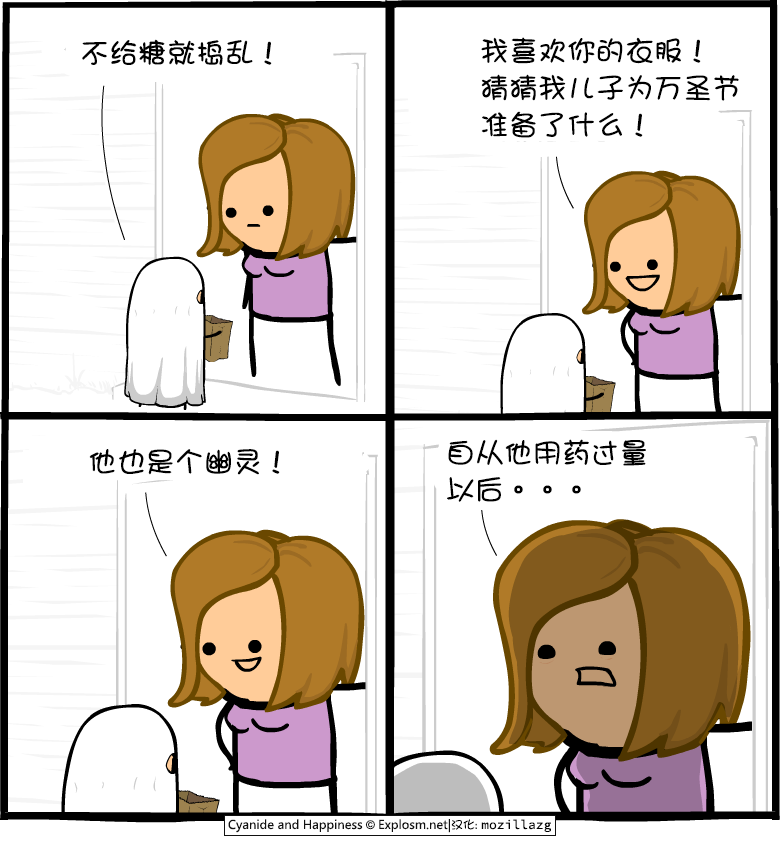
<style>
.page{position:relative;width:780px;height:845px;background:#ffffff}
.page>*{position:absolute;margin:0}
.t1{font:29px "DFGirl";color:#000000}
.t2{font:29px/37px "DFGirl";color:#000000}
</style>
<div class="page">
<p class="t1" style="left:82px;top:39px;width:190px;height:27px">不给糖就捣乱！</p>
<p class="t2" style="left:481px;top:37px;width:258px;height:101px">我喜欢你的衣服！<br>猜猜我儿子为万圣节<br>准备了什么！</p>
<p class="t1" style="left:89px;top:449px;width:191px;height:26px">他也是个幽灵！</p>
<p class="t2" style="left:447px;top:439px;width:199px;height:63px">自从他用药过量<br>以后。。。</p>
</div>
